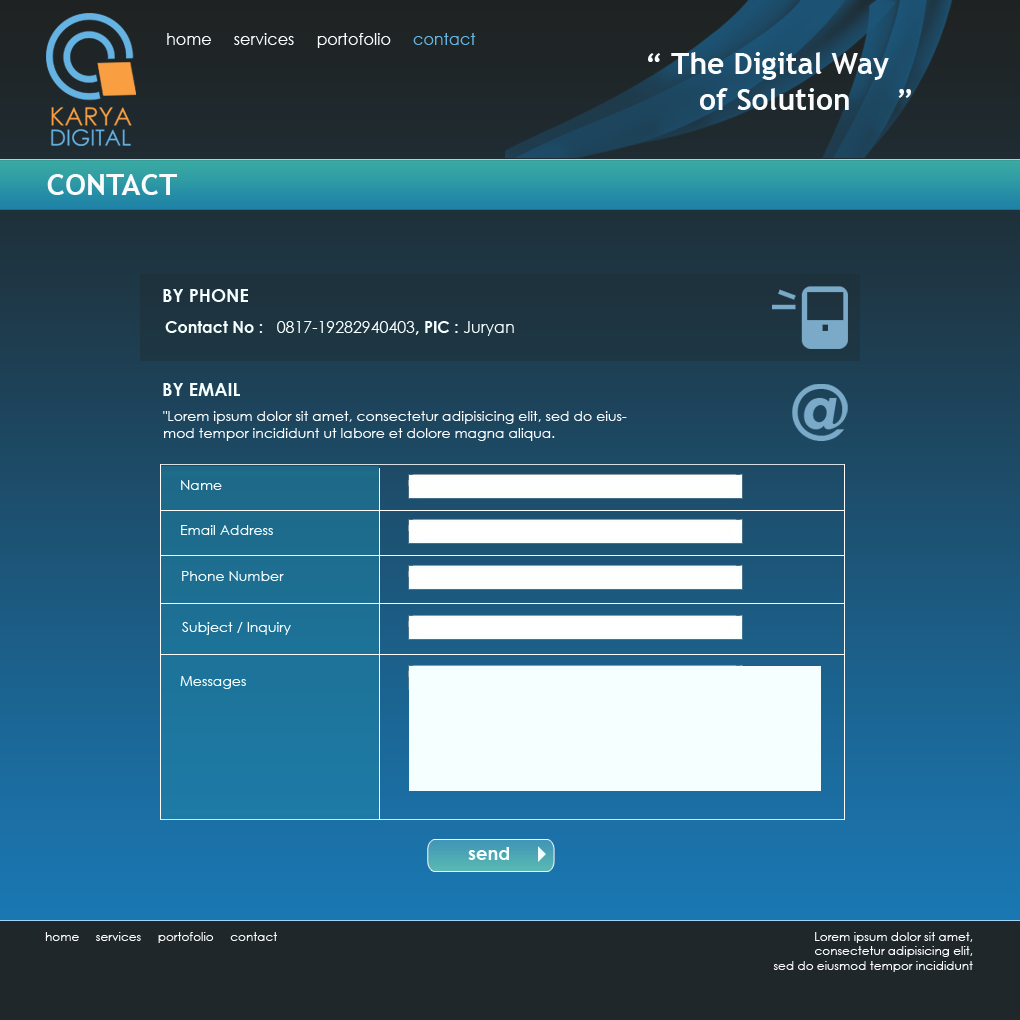
<style>
.page{position:relative;width:1020px;height:1020px}
.page>*{position:absolute;margin:0}
.t1{font:16px "CenturyGothic";color:#f9fbfd}
.t2{font:16px "CenturyGothic";color:#65b3e3}
.t3{font:30px "TrebuchetMS-Bold";color:#f9fbfd}
.t4{font:18px "CenturyGothic-Bold";color:#f5ffff}
.t5{font:16px "CenturyGothic";color:#f5ffff}
.t6{font:16px "CenturyGothic-Bold";color:#f5ffff}
.t7{font:14px "CenturyGothic";color:#f9fbfd}
.t8{font:14px "CenturyGothic";color:#f5ffff}
.t9{font:12px "CenturyGothic";color:#fbfbfb}
.t10{font:12px "CenturyGothic";color:#fcfcfe}
</style>
<div class="page">
<p class="t1" style="left:167px;top:33px;width:309px;height:15px">home     services     portofolio     <span class="t2">contact</span></p>
<p class="t3" style="left:648px;top:52px;width:263px;height:58px">“ The Digital Way<br>      of Solution     ”</p>
<p class="t3" style="left:47px;top:174px;width:130px;height:21px">CONTACT</p>
<p class="t4" style="left:163px;top:289px;width:85px;height:13px">BY PHONE</p>
<p class="t5" style="left:165px;top:321px;width:349px;height:15px"><span class="t6">Contact No :   </span>0817-19282940403<span class="t6">, PIC : </span>Juryan</p>
<p class="t4" style="left:163px;top:383px;width:77px;height:13px">BY EMAIL</p>
<p class="t7" style="left:163px;top:411px;width:464px;height:30px">"Lorem ipsum dolor sit amet, consectetur adipisicing elit, sed do eiusmod tempor incididunt ut labore et dolore magna aliqua.</p>
<p class="t8" style="left:181px;top:480px;width:41px;height:10px">Name</p>
<p class="t8" style="left:181px;top:525px;width:92px;height:10px">Email Address</p>
<p class="t8" style="left:182px;top:571px;width:102px;height:10px">Phone Number</p>
<p class="t8" style="left:182px;top:622px;width:109px;height:13px">Subject / Inquiry</p>
<p class="t8" style="left:180px;top:676px;width:66px;height:13px">Messages</p>
<p class="t9" style="left:45px;top:932px;width:232px;height:11px">home     services     portofolio     contact</p>
<p class="t10" style="left:773px;top:932px;width:200px;height:40px;text-align:right">Lorem ipsum dolor sit amet, <br>consectetur adipisicing elit, <br>sed do eiusmod tempor incididunt</p>
</div>
